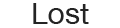
<style>
.page{position:relative;width:120px;height:28px;background:#ffffff}
.page>*{position:absolute;margin:0}
.t1{font:30px "HelveticaNeue";color:#242424}
</style>
<div class="page">
<p class="t1" style="left:33px;top:3px;width:56px;height:21px">Lost</p>
</div>
